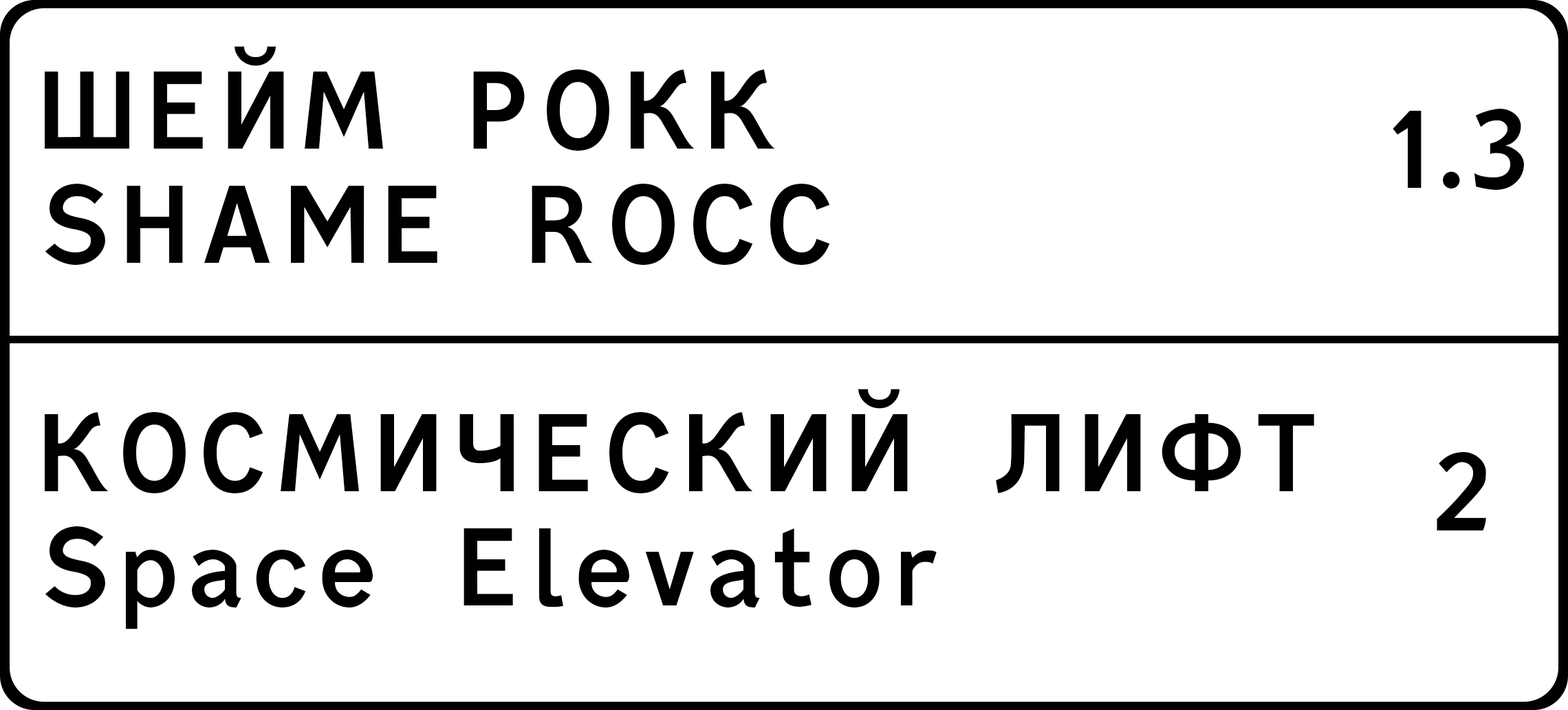
<style>
.page{position:relative;width:1568px;height:710px;background:#ffffff}
.page>*{position:absolute;margin:0}
.t1{font:137.5px/114.2px "russianroadsign-medium";color:#000000}
</style>
<div class="page">
<p class="t1" style="left:45px;top:46px;width:1269px;height:583px">ШЕЙМ РОКК<br>SHAME ROCC<br><br>КОСМИЧЕСКИЙ ЛИФТ<br>Space Elevator</p>
<p class="t1" style="left:1393px;top:109px;width:131px;height:421px;text-align:center">1.3<br><br><br>2</p>
</div>
